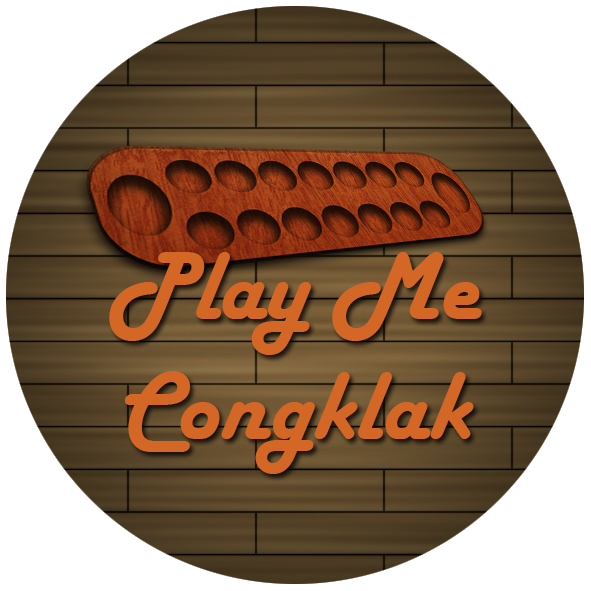
<style>
.page{position:relative;width:591px;height:591px;background:#ffffff}
.page>*{position:absolute;margin:0}
.t1{font:100px "HarlowSolid";color:#d46725}
</style>
<div class="page">
<p class="t1" style="left:109px;top:252px;width:373px;height:222px;text-align:center">Play Me<br>Congklak</p>
</div>
